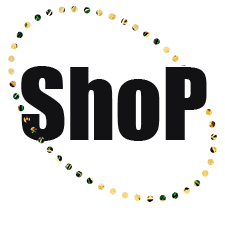
<style>
.page{position:relative;width:225px;height:225px;background:#ffffff}
.page>*{position:absolute;margin:0}
.t1{font:92px "Impact";color:#121114}
</style>
<div class="page">
<p class="t1" style="left:21px;top:66px;width:186px;height:75px">ShoP</p>
</div>
